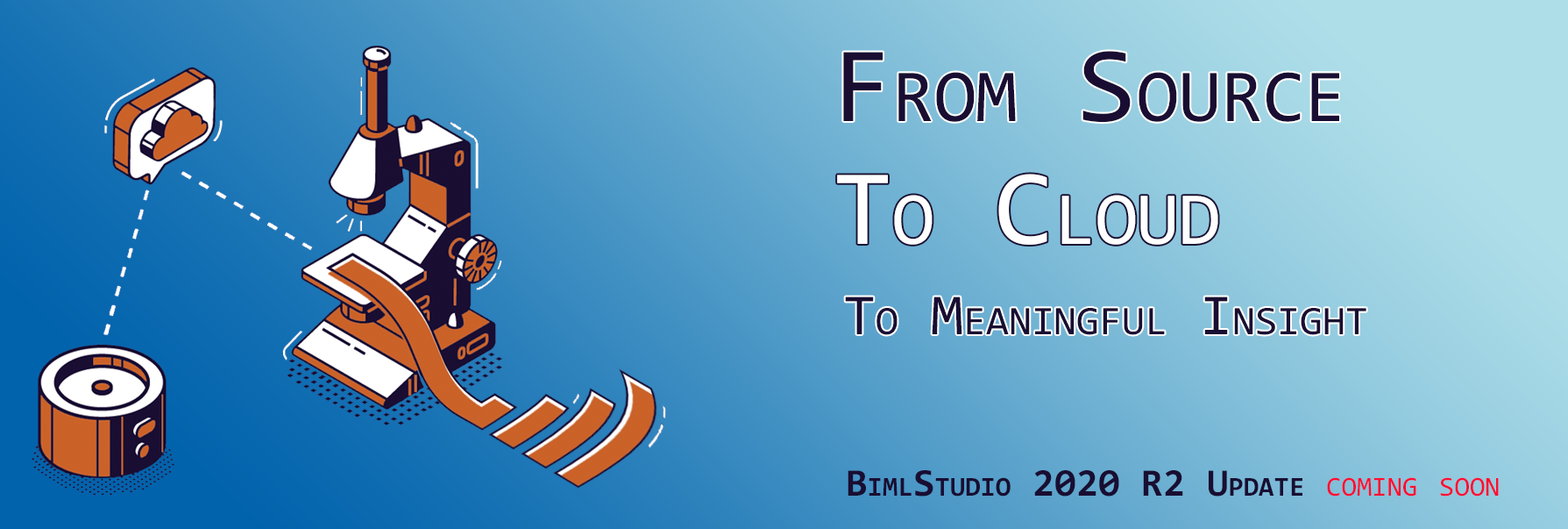
<style>
.page{position:relative;width:1568px;height:529px}
.page>*{position:absolute;margin:0}
.t1{font:107.5px "Consolas";color:#190e32;font-variant:small-caps}
.t2{font:107.5px "Consolas";color:#ffffff;font-variant:small-caps}
.t3{font:58.3px "Consolas";color:#190e32;font-variant:small-caps}
.t4{font:39.1px "Consolas-Bold";color:#190e32;font-variant:small-caps}
.t5{font:39.1px "Consolas";color:#ff0e32;font-variant:small-caps}
</style>
<div class="page">
<p class="t1" style="left:843px;top:51px;width:496px;height:72px">From Source</p>
<p class="t2" style="left:837px;top:174px;width:381px;height:71px">To Cloud</p>
<p class="t3" style="left:845px;top:296px;width:521px;height:39px">To Meaningful Insight</p>
<p class="t4" style="left:848px;top:470px;width:651px;height:26px">BimlStudio 2020 R2 Update <span class="t5">coming soon</span></p>
</div>
